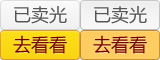
<style>
.page{position:relative;width:160px;height:60px}
.page>*{position:absolute;margin:0}
.t1{font:18px "MicrosoftYaHei";color:#555555}
.t2{font:18px "MicrosoftYaHei";color:#740202}
</style>
<div class="page">
<p class="t1" style="left:14px;top:6px;width:53px;height:18px">已卖光</p>
<p class="t1" style="left:94px;top:6px;width:53px;height:18px">已卖光</p>
<p class="t2" style="left:13px;top:35px;width:54px;height:19px">去看看</p>
<p class="t2" style="left:93px;top:35px;width:54px;height:19px">去看看</p>
</div>
